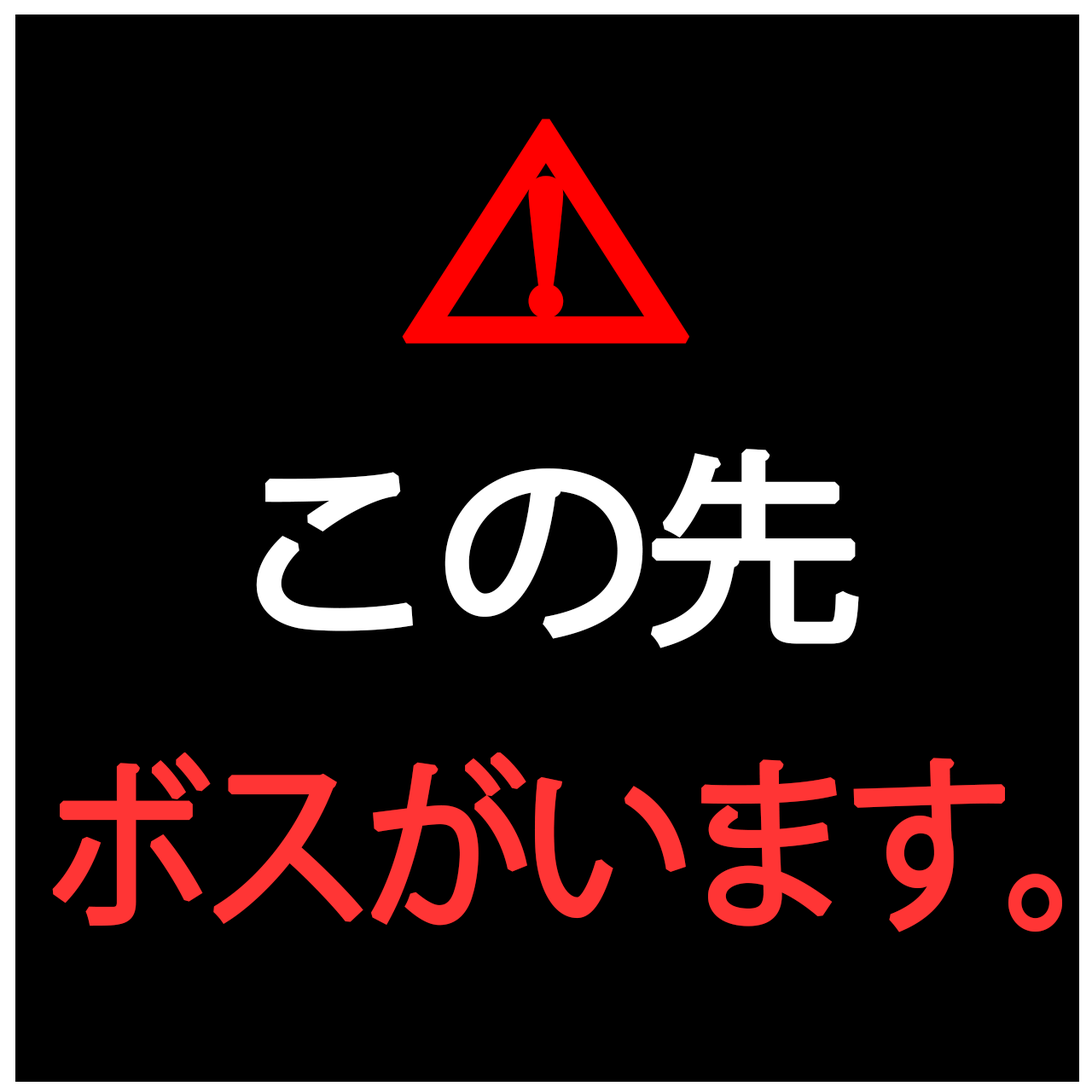
<style>
.page{position:relative;width:1092px;height:1092px;background:#000000}
.page>*{position:absolute;margin:0}
.t1{font:323.5px "KozGoPr6N-Regular";letter-spacing:-0.07em;color:#ff0000;font-weight:bold}
.t2{font:203.9px "KozGoPr6N-Regular";letter-spacing:-0.07em;color:#ffffff;font-weight:bold;scale:1.07 1}
.t3{font:181.5px "KozGoPr6N-Regular";letter-spacing:-0.07em;color:#ff3535;font-weight:bold;scale:0.92 1}
</style>
<div class="page">
<p class="t1" style="left:402px;top:119px;width:287px;height:225px">⚠</p>
<p class="t2" style="left:256px;top:449px;width:603px;height:199px">この先</p>
<p class="t3" style="left:52px;top:752px;width:1011px;height:180px">ボスがいます。</p>
</div>
